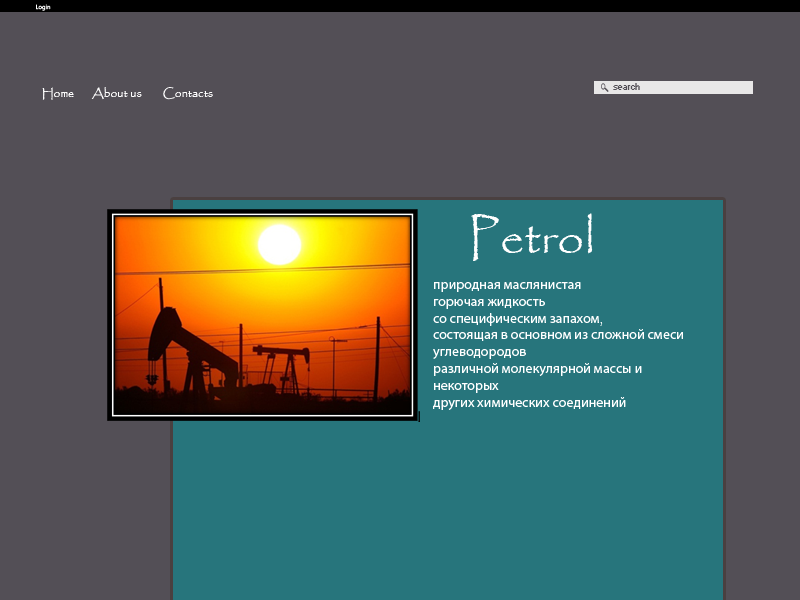
<style>
.page{position:relative;width:800px;height:600px;background:#534f56}
.page>*{position:absolute;margin:0}
.t1{font:6px "SegoeUI";color:#ffffff}
.t2{font:12px "Papyrus-Regular";color:#ffffff}
.t3{font:9px "Small Fonts";color:#534f56}
.t4{font:48px "Papyrus-Regular";color:#ffffff}
.t5{font:14px "MyriadPro-Regular";color:#ffffff}
.t6{font:14px "Papyrus-Regular";color:#ffffff}
</style>
<div class="page">
<p class="t1" style="left:36px;top:4px;width:15px;height:7px">Login</p>
<p class="t2" style="left:42px;top:87px;width:32px;height:13px">Home</p>
<p class="t2" style="left:91px;top:87px;width:51px;height:13px">About us</p>
<p class="t2" style="left:163px;top:87px;width:50px;height:13px">Contacts</p>
<p class="t3" style="left:613px;top:83px;width:27px;height:7px">search</p>
<p class="t4" style="left:471px;top:213px;width:122px;height:48px">Petrol</p>
<p class="t5" style="left:433px;top:282px;width:250px;height:128px">природная маслянистая <br>горючая жидкость <br>со специфическим запахом<span class="t6">, <br></span>состоящая в основном из сложной смеси <br>углеводородов <br>различной молекулярной массы и <br>некоторых <br>других химических соединений</p>
</div>
